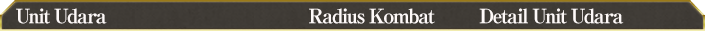
<style>
.page{position:relative;width:705px;height:31px}
.page>*{position:absolute;margin:0}
.t1{font:20px "RyuminPro-ExBold";letter-spacing:-0.08em;color:#fef9f8}
</style>
<div class="page">
<p class="t1" style="left:16px;top:8px;width:608px;height:16px">Unit Udara        Radius Kombat         Detail Unit Udara</p>
</div>
